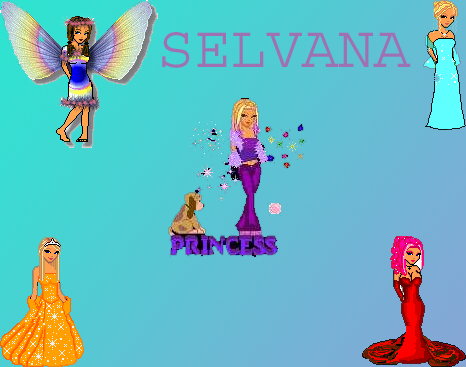
<style>
.page{position:relative;width:466px;height:367px}
.page>*{position:absolute;margin:0}
.t1{font:60px "Courier";color:#9e72b2}
</style>
<div class="page">
<p class="t1" style="left:162px;top:32px;width:249px;height:36px">SELVANA</p>
</div>
